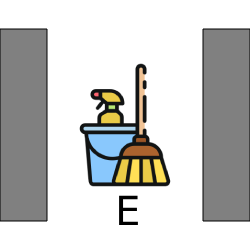
<style>
.page{position:relative;width:250px;height:250px;background:#ffffff}
.page>*{position:absolute;margin:0}
.t1{font:40px "DejaVuSans";color:#000000}
</style>
<div class="page">
<p class="t1" style="left:119px;top:195px;width:19px;height:30px">E</p>
</div>
